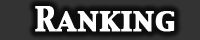
<style>
.page{position:relative;width:200px;height:40px;background:#333333}
.page>*{position:absolute;margin:0}
.t1{font:30px "CapitalsRegular";color:#ffffff;font-weight:bold}
</style>
<div class="page">
<p class="t1" style="left:35px;top:6px;width:140px;height:26px">Ranking</p>
</div>
